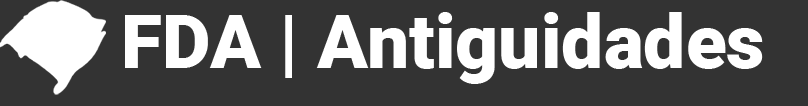
<style>
.page{position:relative;width:808px;height:106px;background:#333333}
.page>*{position:absolute;margin:0}
.t1{font:75px "Roboto-Black";color:#ffffff}
</style>
<div class="page">
<p class="t1" style="left:125px;top:12px;width:638px;height:72px">FDA | Antiguidades</p>
</div>
